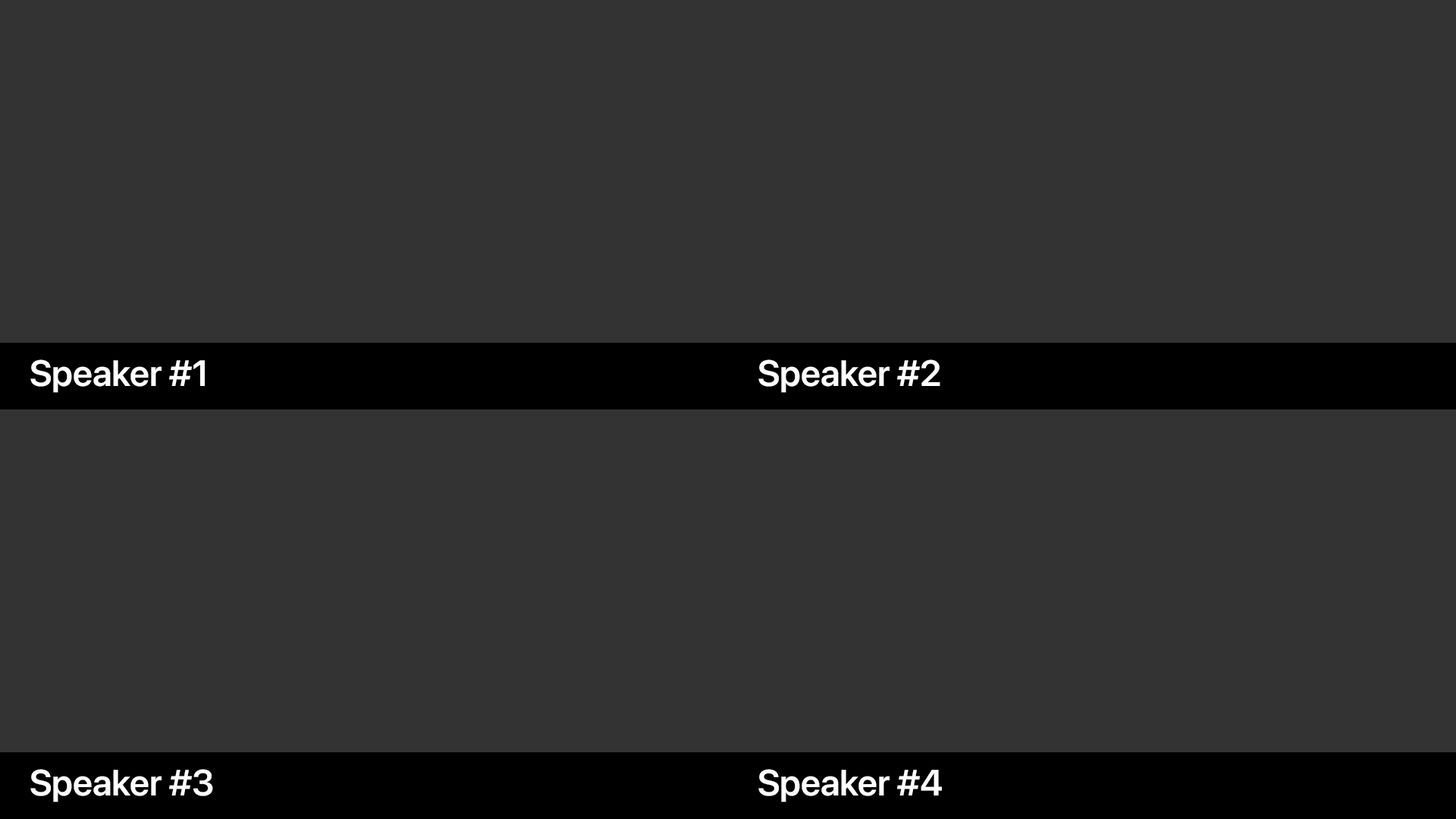
<style>
.page{position:relative;width:1456px;height:819px;background:#333333}
.page>*{position:absolute;margin:0}
.t1{font:36.4px "SFProDisplay-Semibold";color:#ffffff}
</style>
<div class="page">
<p class="t1" style="left:30px;top:359px;width:175px;height:34px">Speaker #1</p>
<p class="t1" style="left:758px;top:359px;width:182px;height:34px">Speaker #2</p>
<p class="t1" style="left:30px;top:769px;width:183px;height:33px">Speaker #3</p>
<p class="t1" style="left:758px;top:769px;width:184px;height:33px">Speaker #4</p>
</div>
